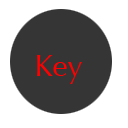
<style>
.page{position:relative;width:128px;height:128px;background:#353535}
.page>*{position:absolute;margin:0}
.t1{font:30px "Optima-Regular";color:#ff0000}
</style>
<div class="page">
<p class="t1" style="left:37px;top:55px;width:45px;height:29px">Key</p>
</div>
